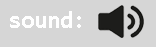
<style>
.page{position:relative;width:156px;height:47px;background:#d6d6d6}
.page>*{position:absolute;margin:0}
.t1{font:24.2px "Consolas-Bold";color:#ffffff}
</style>
<div class="page">
<p class="t1" style="left:10px;top:11px;width:71px;height:17px">sound:</p>
</div>
